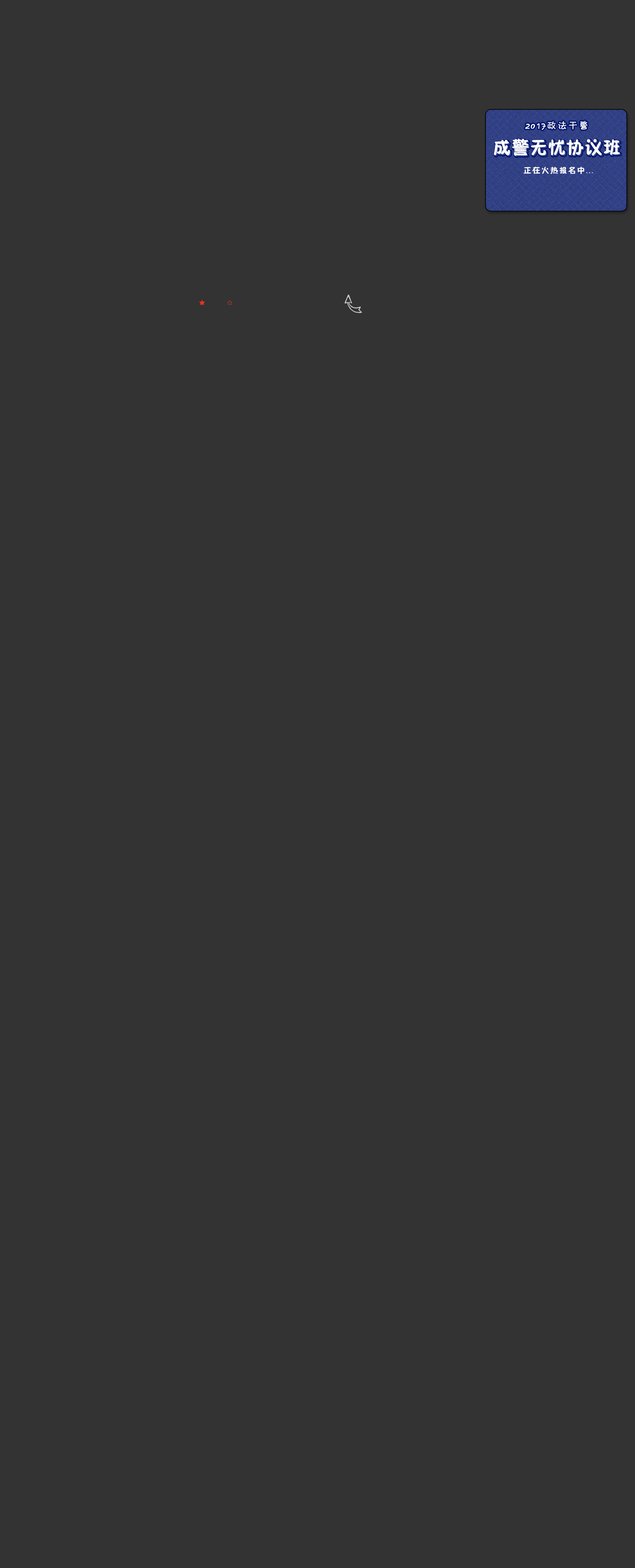
<style>
.page{position:relative;width:635px;height:1568px;background:#333333}
.page>*{position:absolute;margin:0}
.t1{font:9.7px "FZKATJW--GB1-0";letter-spacing:0.1em;color:#ffffff}
.t2{font:17.7px "FZSEJW--GB1-0";color:#ffffff;font-weight:bold}
.t3{font:17.7px "FZSEJW--GB1-0";font-weight:bold}
.t4{font:8.1px "FZSEJW--GB1-0";letter-spacing:0.1em;color:#ffffff}
</style>
<div class="page">
<p class="t1" style="left:525px;top:121px;width:62px;height:9px">2017政法干警</p>
<p class="t2" style="left:494px;top:139px;width:126px;height:17px">成警无忧协议班</p>
<p class="t3" style="left:495px;top:140px;width:126px;height:17px">成警无忧协议班</p>
<p class="t4" style="left:523px;top:166px;width:70px;height:8px">正在火热报名中...</p>
</div>
